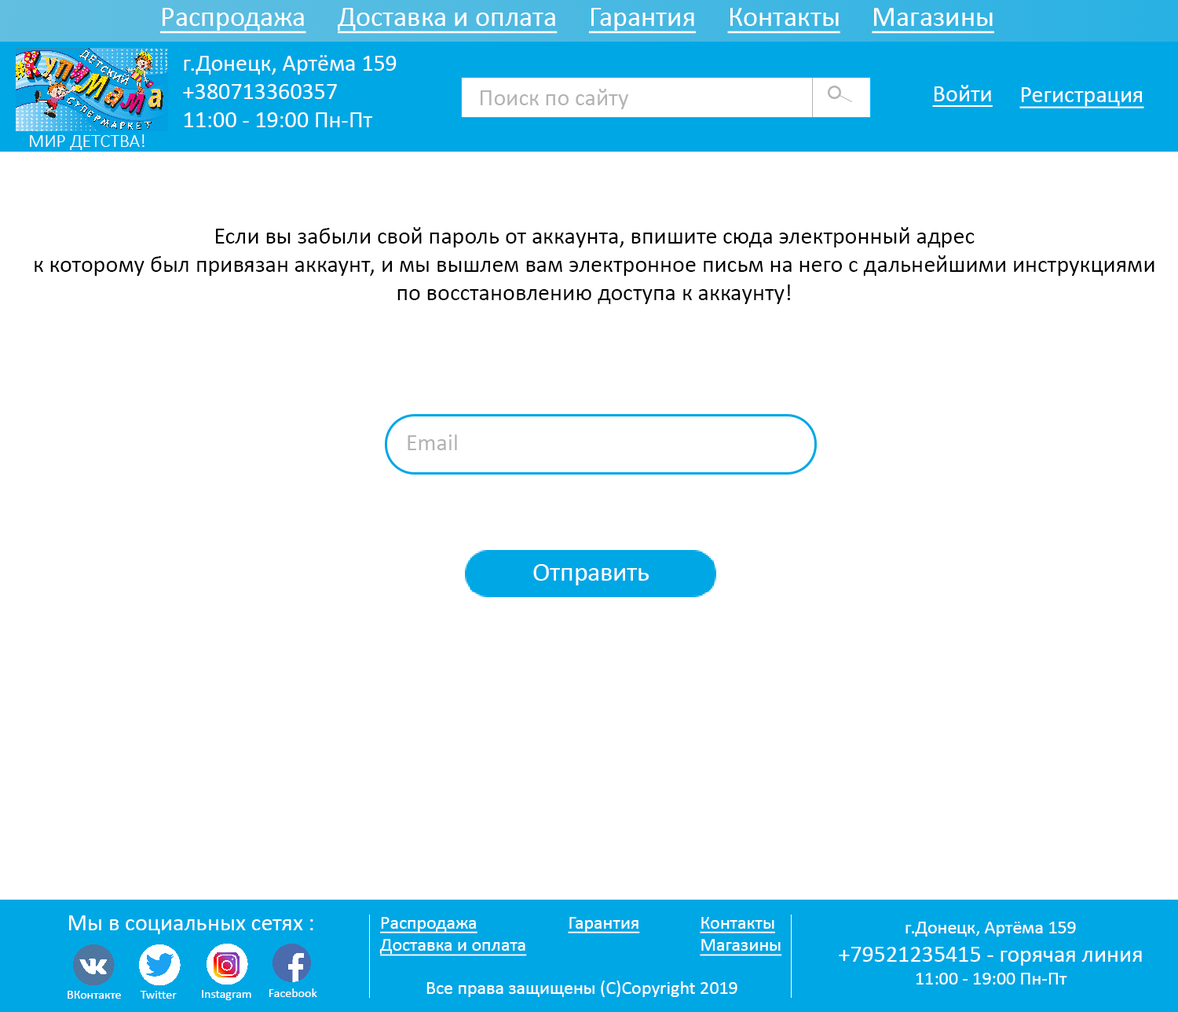
<style>
.page{position:relative;width:1178px;height:1012px;background:#ffffff}
.page>*{position:absolute;margin:0}
.t1{font:28.3px "Calibri";color:#ffffff;text-decoration:underline}
.t2{font:23.6px "Calibri";color:#ffffff}
.t3{font:23.6px "Calibri";color:#b3b3b3}
.t4{font:23.6px "Calibri";color:#ffffff;text-decoration:underline}
.t5{font:18.9px "Calibri-Light";color:#ffffff}
.t6{font:23.6px "Calibri";color:#000000}
.t7{font:26.3px "Calibri";color:#ffffff}
.t8{font:18.9px "Calibri";color:#ffffff;text-decoration:underline}
.t9{font:18.9px "Calibri";color:#ffffff}
.t10{font:12.6px "Calibri";color:#ffffff}
</style>
<div class="page">
<p class="t1" style="left:160px;top:8px;width:835px;height:26px">Распродажа     Доставка и оплата     Гарантия     Контакты     Магазины</p>
<p class="t2" style="left:183px;top:55px;width:214px;height:72px">г.Донецк, Артёма 159<br>+380713360357<br>11:00 - 19:00 Пн-Пт</p>
<p class="t3" style="left:481px;top:89px;width:147px;height:20px">Поиск по сайту</p>
<p class="t4" style="left:933px;top:85px;width:60px;height:22px">Войти</p>
<p class="t4" style="left:1020px;top:87px;width:125px;height:21px">Регистрация</p>
<p class="t5" style="left:30px;top:134px;width:115px;height:16px">МИР ДЕТСТВА!</p>
<p class="t6" style="left:35px;top:227px;width:1120px;height:77px;text-align:center">Если вы забыли свой пароль от аккаунта, впишите сюда электронный адрес<br>к которому был привязан аккаунт, и мы вышлем вам электронное письм на него с дальнейшими инструкциями по восстановлению доступа к аккаунту!</p>
<p class="t3" style="left:408px;top:434px;width:49px;height:16px">Email</p>
<p class="t7" style="left:533px;top:564px;width:116px;height:21px">Отправить</p>
<p class="t2" style="left:69px;top:915px;width:244px;height:19px">Мы в социальных сетях :</p>
<p class="t8" style="left:379px;top:917px;width:148px;height:39px">Распродажа<br>Доставка и оплата</p>
<p class="t8" style="left:568px;top:917px;width:72px;height:16px">Гарантия</p>
<p class="t8" style="left:700px;top:917px;width:82px;height:39px">Контакты<br>Магазины</p>
<p class="t2" style="left:839px;top:922px;width:303px;height:62px;text-align:center"><span class="t9">г.Донецк, Артёма 159<br></span>+79521235415 - горячая линия<br><span class="t9">11:00 - 19:00 Пн-Пт</span></p>
<p class="t10" style="left:202px;top:990px;width:49px;height:10px">Instagram</p>
<p class="t10" style="left:269px;top:988px;width:48px;height:9px">Facebook</p>
<p class="t9" style="left:427px;top:980px;width:311px;height:17px">Все права защищены (С)Copyright 2019</p>
<p class="t10" style="left:68px;top:991px;width:53px;height:8px">ВКонтакте</p>
<p class="t10" style="left:140px;top:991px;width:37px;height:8px">Twitter</p>
</div>
